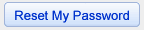
<style>
.page{position:relative;width:147px;height:30px;background:#eeeeee}
.page>*{position:absolute;margin:0}
.t1{font:13px "ArialMT";color:#0033cc}
</style>
<div class="page">
<p class="t1" style="left:15px;top:10px;width:114px;height:13px">Reset My Password</p>
</div>
